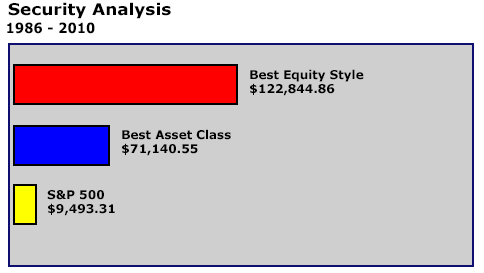
<style>
.page{position:relative;width:484px;height:273px;background:#cfcfcf}
.page>*{position:absolute;margin:0}
.t1{font:16px "Verdana-Bold";color:#000000;scale:1.06 1}
.t2{font:14px "Verdana-Bold";color:#000000;scale:0.94 1}
.t3{font:12px "Verdana-Bold";color:#000000}
</style>
<div class="page">
<p class="t1" style="left:8px;top:2px;width:163px;height:17px">Security Analysis</p>
<p class="t2" style="left:7px;top:22px;width:88px;height:12px">1986 - 2010</p>
<p class="t3" style="left:250px;top:69px;width:114px;height:27px">Best Equity Style<br>$122,844.86</p>
<p class="t3" style="left:122px;top:129px;width:109px;height:27px">Best Asset Class<br>$71,140.55</p>
<p class="t3" style="left:47px;top:190px;width:68px;height:26px">S&amp;P 500<br>$9,493.31</p>
</div>
